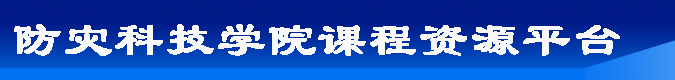
<style>
.page{position:relative;width:675px;height:80px}
.page>*{position:absolute;margin:0}
.t1{font:48px "LiSu";letter-spacing:0.04em;color:#faf9f9;font-weight:bold}
</style>
<div class="page">
<p class="t1" style="left:14px;top:24px;width:606px;height:32px">防灾科技学院课程资源平台</p>
</div>
